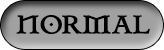
<style>
.page{position:relative;width:164px;height:50px;background:#a1a1a1}
.page>*{position:absolute;margin:0}
.t1{font:22px "CelticGaramondthe2nd";color:#000000;font-weight:bold}
</style>
<div class="page">
<p class="t1" style="left:16px;top:15px;width:134px;height:19px">NORMAL</p>
</div>
